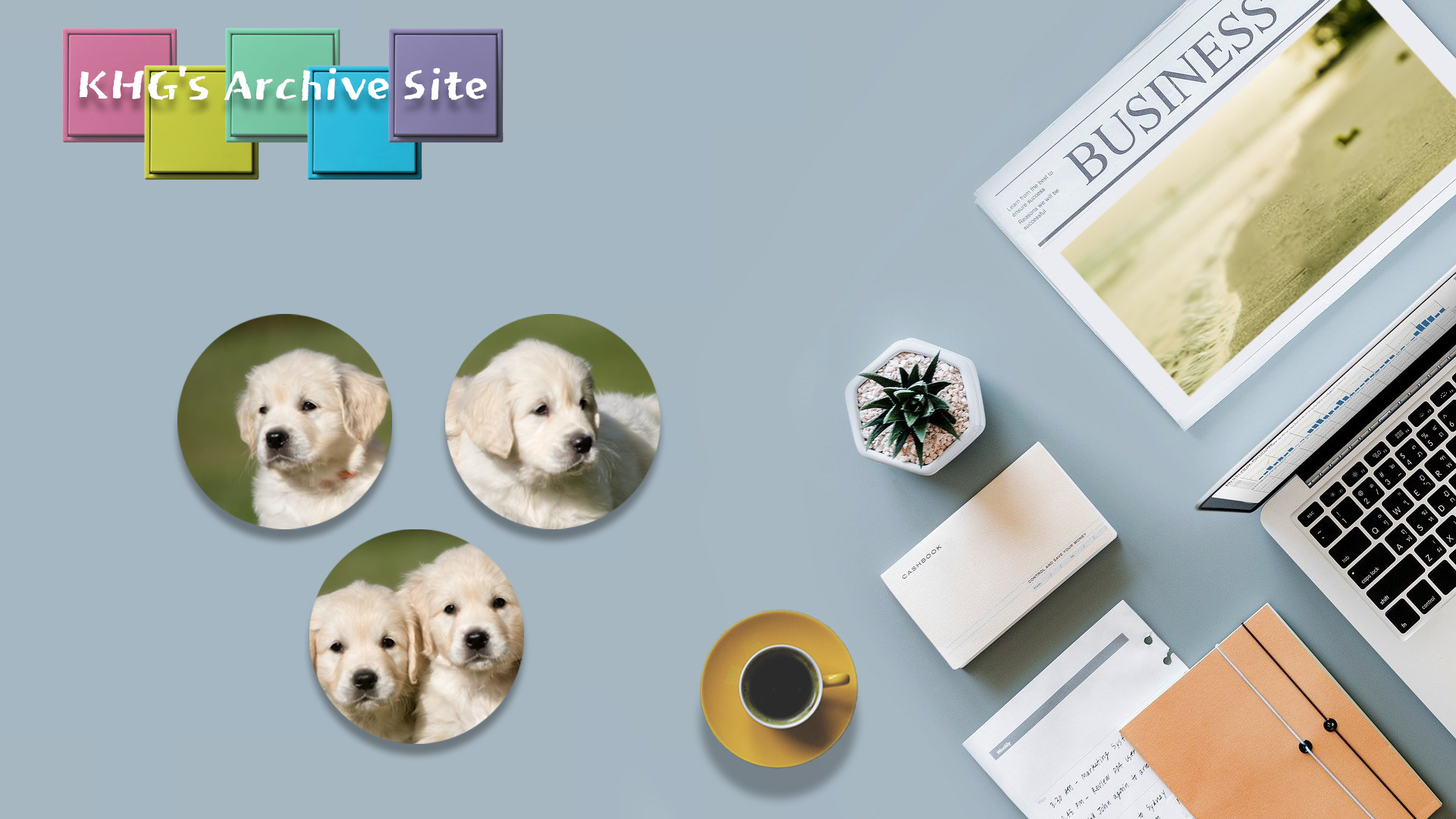
<style>
.page{position:relative;width:1456px;height:819px;background:#a5b7c3}
.page>*{position:absolute;margin:0}
.t1{font:45.5px "JejuHallasan";color:#fffefe}
</style>
<div class="page">
<p class="t1" style="left:79px;top:66px;width:408px;height:35px">KHG’s Archive Site</p>
</div>
